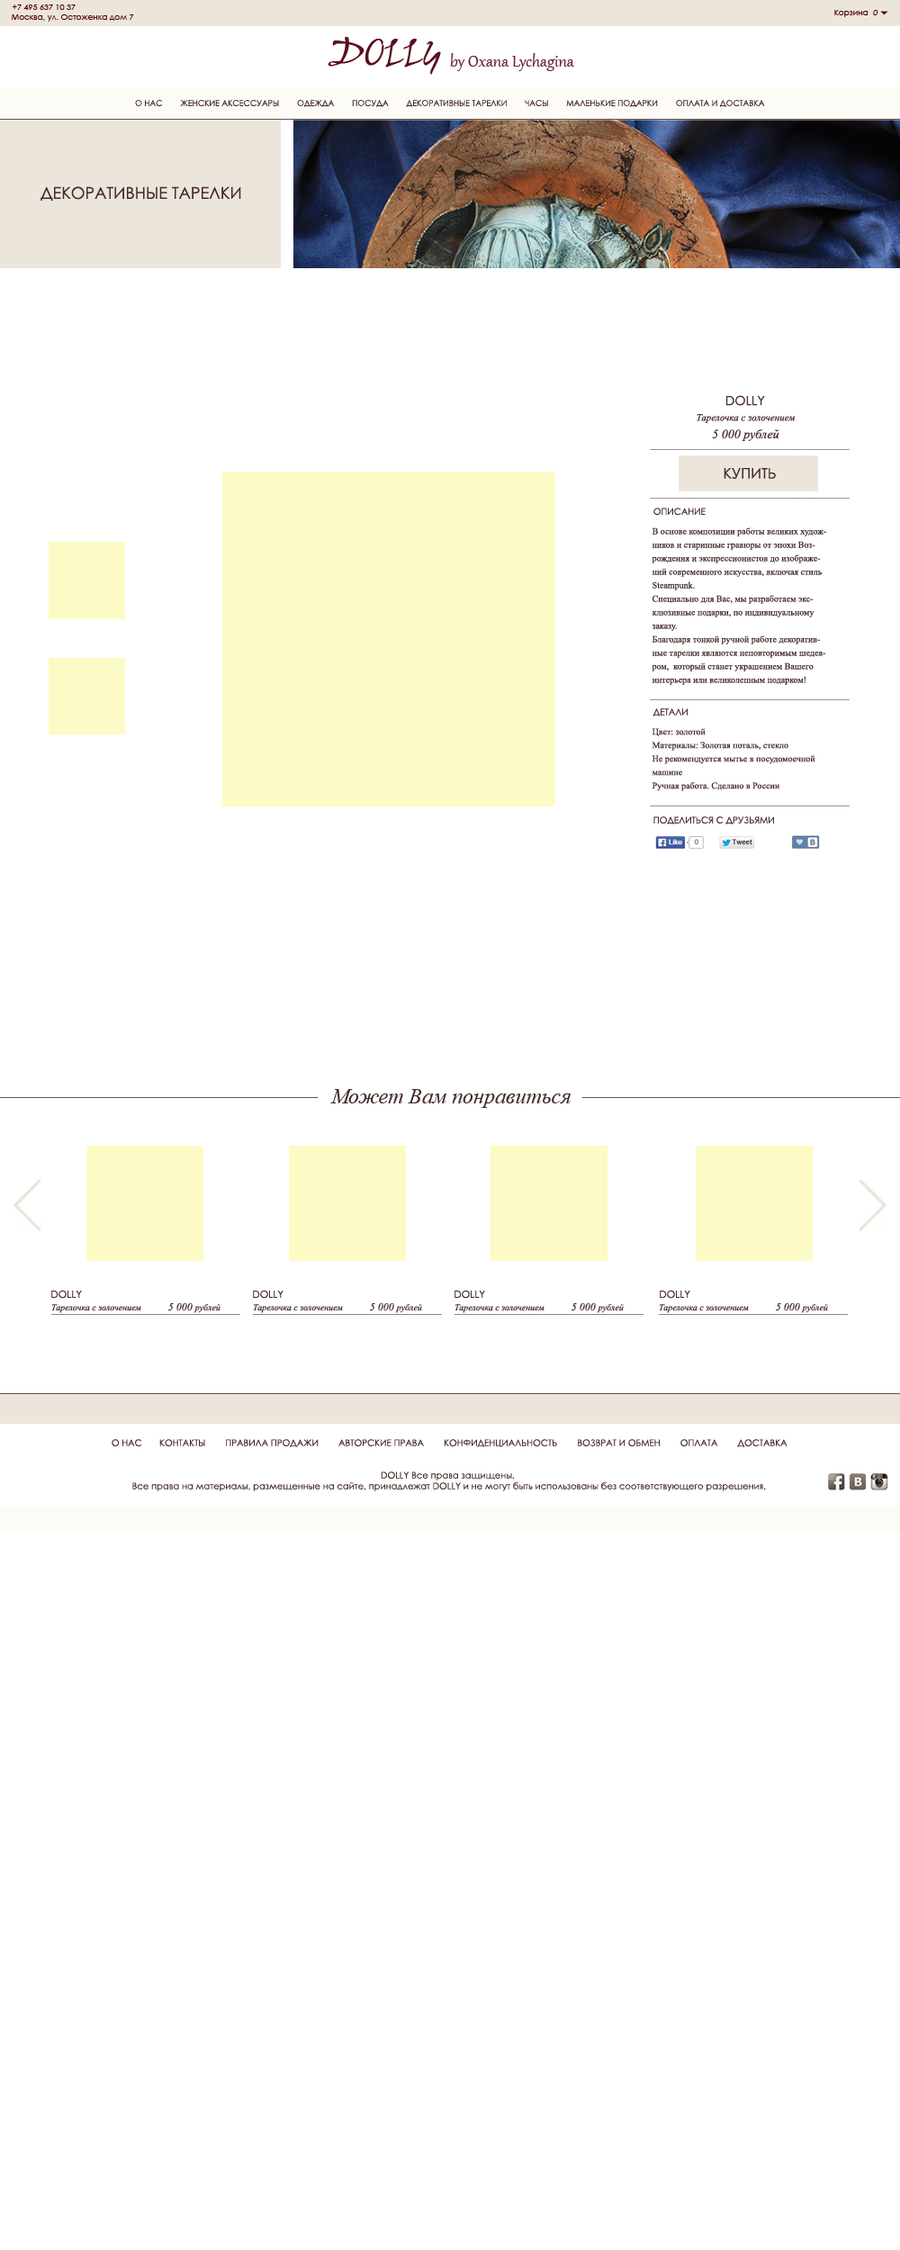
<style>
.page{position:relative;width:900px;height:2250px;background:#ffffff}
.page>*{position:absolute;margin:0}
.t1{font:8.1px "CenturyGothic";color:#510111}
.t2{font:8.1px "CenturyGothic";color:#510111;font-style:italic}
.t3{font:29.7px "Dali";color:#510111;font-weight:bold}
.t4{font:19.8px "Gabriola";color:#6b2734}
.t5{font:8.1px "CenturyGothic";color:#442a29}
.t6{font:16.2px "CenturyGothic";color:#442a29}
.t7{font:12.6px "CenturyGothic";color:#442a29}
.t8{font:9.9px/17.5px "TimesNewRomanPS-ItalicMT";color:#442a29}
.t9{font:12.6px/17.5px "TimesNewRomanPS-ItalicMT";color:#442a29}
.t10{font:14.4px "CenturyGothic";color:#442a29}
.t11{font:9px "CenturyGothic";color:#442a29}
.t12{font:9px/13.5px "TimesNewRomanPSMT";color:#442a29}
.t13{font:21.6px "TimesNewRomanPS-ItalicMT";color:#442a29}
.t14{font:9.9px "CenturyGothic";color:#442a29}
.t15{font:9px "TimesNewRomanPS-ItalicMT";color:#442a29}
.t16{font:10.8px "TimesNewRomanPS-ItalicMT";color:#442a29}
</style>
<div class="page">
<p class="t1" style="left:12px;top:4px;width:64px;height:6px">+7 495 637 10 37</p>
<p class="t1" style="left:12px;top:14px;width:122px;height:8px">Москва, ул. Остоженка дом 7</p>
<p class="t1" style="left:834px;top:10px;width:44px;height:7px">Корзина  <span class="t2">0</span></p>
<p class="t3" style="left:328px;top:37px;width:113px;height:38px">DOLLY</p>
<p class="t4" style="left:450px;top:53px;width:124px;height:18px">by Oxana Lychagina</p>
<p class="t5" style="left:135px;top:100px;width:630px;height:7px">О НАС        ЖЕНСКИЕ АКСЕССУАРЫ        ОДЕЖДА        ПОСУДА        ДЕКОРАТИВНЫЕ ТАРЕЛКИ        ЧАСЫ        МАЛЕНЬКИЕ ПОДАРКИ        ОПЛАТА И ДОСТАВКА</p>
<p class="t6" style="left:40px;top:186px;width:201px;height:15px">ДЕКОРАТИВНЫЕ ТАРЕЛКИ</p>
<p class="t7" style="left:726px;top:395px;width:39px;height:11px">DOLLY</p>
<p class="t8" style="left:697px;top:414px;width:98px;height:27px;text-align:center">Тарелочка с золочением <br><span class="t9">5 000 рублей</span></p>
<p class="t10" style="left:724px;top:468px;width:52px;height:11px">КУПИТЬ</p>
<p class="t11" style="left:653px;top:508px;width:53px;height:8px">ОПИСАНИЕ</p>
<p class="t12" style="left:652px;top:527px;width:174px;height:158px">В основе композиции работы великих художников и старинные гравюры от эпохи Возрождения и экспрессионистов до изображений современного искусства, включая стиль Steampunk.<br>Специально для Вас, мы разработаем эксклюзивные подарки, по индивидуальному заказу.<br>Благодаря тонкой ручной работе декоративные тарелки являются неповторимым шедевром,  который станет украшением Вашего интерьера или великолепным подарком!</p>
<p class="t11" style="left:652px;top:708px;width:36px;height:8px">ДЕТАЛИ</p>
<p class="t12" style="left:652px;top:728px;width:163px;height:63px">Цвет: золотой<br>Материалы: Золотая поталь, стекло<br>Не рекомендуется мытье в посудомоечной машине<br>Ручная работа. Сделано в России</p>
<p class="t11" style="left:653px;top:816px;width:121px;height:8px">ПОДЕЛИТЬСЯ С ДРУЗЬЯМИ</p>
<p class="t13" style="left:330px;top:1089px;width:241px;height:19px">Может Вам понравиться</p>
<p class="t14" style="left:51px;top:1290px;width:31px;height:9px">DOLLY</p>
<p class="t14" style="left:253px;top:1290px;width:30px;height:9px">DOLLY</p>
<p class="t14" style="left:454px;top:1290px;width:31px;height:9px">DOLLY</p>
<p class="t14" style="left:660px;top:1290px;width:30px;height:9px">DOLLY</p>
<p class="t15" style="left:51px;top:1302px;width:169px;height:11px">Тарелочка с золочением            <span class="t16">5 000 </span>рублей</p>
<p class="t15" style="left:253px;top:1302px;width:169px;height:11px">Тарелочка с золочением            <span class="t16">5 000 </span>рублей</p>
<p class="t15" style="left:454px;top:1302px;width:170px;height:11px">Тарелочка с золочением            <span class="t16">5 000 </span>рублей</p>
<p class="t15" style="left:659px;top:1302px;width:169px;height:11px">Тарелочка с золочением            <span class="t16">5 000 </span>рублей</p>
<p class="t11" style="left:112px;top:1439px;width:675px;height:8px">О НАС       КОНТАКТЫ        ПРАВИЛА ПРОДАЖИ        АВТОРСКИЕ ПРАВА        КОНФИДЕНЦИАЛЬНОСТЬ        ВОЗВРАТ И ОБМЕН        ОПЛАТА        ДОСТАВКА</p>
<p class="t11" style="left:132px;top:1471px;width:634px;height:20px;text-align:center">DOLLY Все права защищены. <br>Все права на материалы, размещенные на сайте, принадлежат DOLLY и не могут быть использованы без соответствующего разрешения.</p>
</div>
